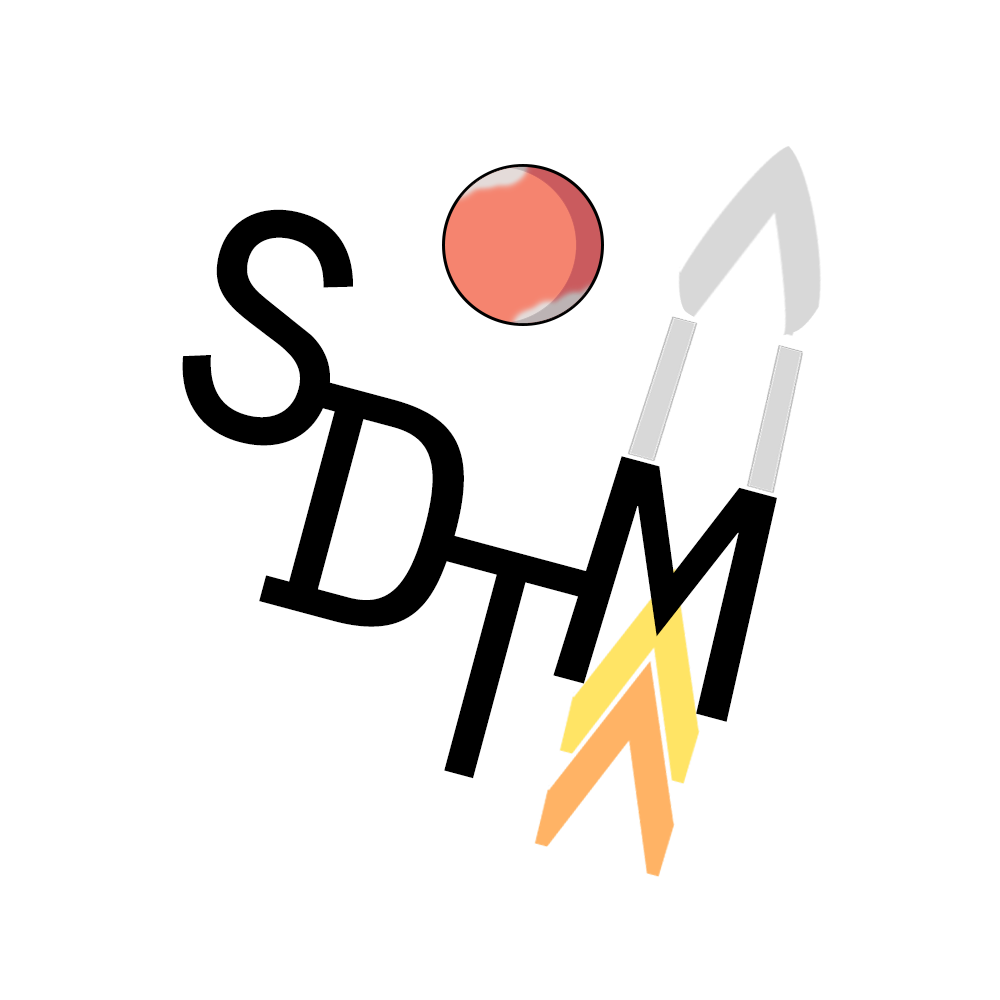
<style>
.page{position:relative;width:1000px;height:1000px;background:#ffffff}
.page>*{position:absolute;margin:0}
.t1{font:439.7px "OratorStd";color:#000000}
</style>
<div class="page">
<p class="t1" style="left:182px;top:209px;width:171px;height:237px;rotate:15deg">s</p>
<p class="t1" style="left:259px;top:379px;width:205px;height:248px;rotate:15deg">d</p>
<p class="t1" style="left:553px;top:456px;width:224px;height:266px;rotate:15deg">m</p>
<p class="t1" style="left:435px;top:532px;width:158px;height:247px;rotate:15deg">t</p>
</div>
